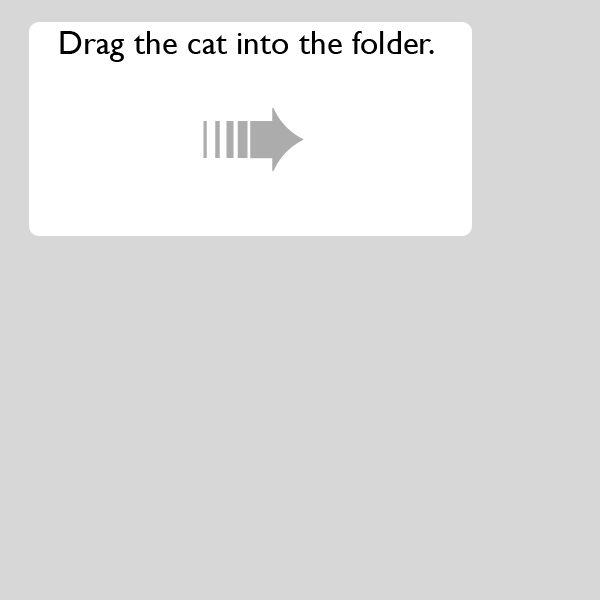
<style>
.page{position:relative;width:600px;height:600px;background:#d7d7d7}
.page>*{position:absolute;margin:0}
.t1{font:33.3px "GillSans";color:#000000}
</style>
<div class="page">
<p class="t1" style="left:60px;top:31px;width:374px;height:31px">Drag the cat into the folder.</p>
</div>
